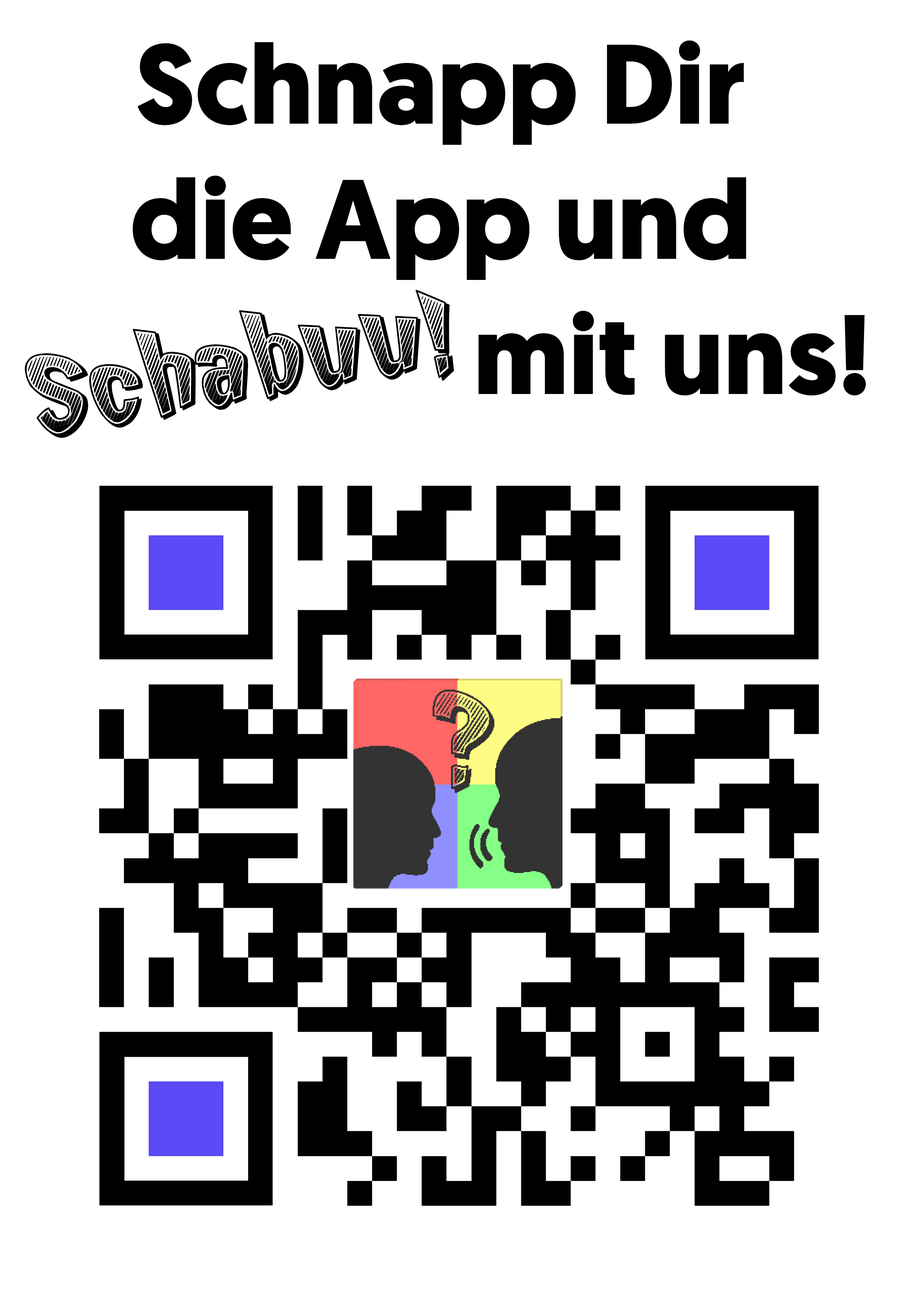
<style>
.page{position:relative;width:918px;height:1299px;background:#ffffff}
.page>*{position:absolute;margin:0}
.t1{font:112.6px "Geomanist-Bold";color:#000000}
.t2{font:125.7px "ChickenButt";color:#000000}
</style>
<div class="page">
<p class="t1" style="left:133px;top:40px;width:733px;height:355px;text-align:center">Schnapp Dir <br>die App und <br>                    mit uns!</p>
<p class="t2" style="left:25px;top:290px;width:429px;height:148px;rotate:-10deg">Schabuu!</p>
</div>
